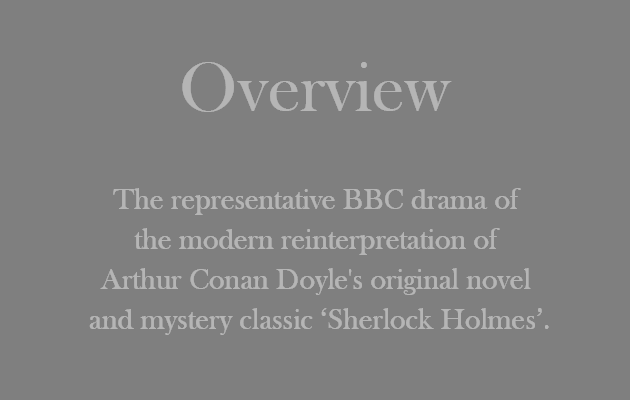
<style>
.page{position:relative;width:630px;height:400px;background:#7f7f7f}
.page>*{position:absolute;margin:0}
.t1{font:72px "BaskOldFace";color:#b5b5b5}
.t2{font:30px/40px "BaskOldFace";color:#b5b5b5}
</style>
<div class="page">
<p class="t1" style="left:182px;top:62px;width:270px;height:50px">Overview</p>
<p class="t2" style="left:89px;top:188px;width:460px;height:147px;text-align:center">The representative BBC drama of <br>the modern reinterpretation of <br>Arthur Conan Doyle's original novel <br>and mystery classic ‘Sherlock Holmes’.</p>
</div>
